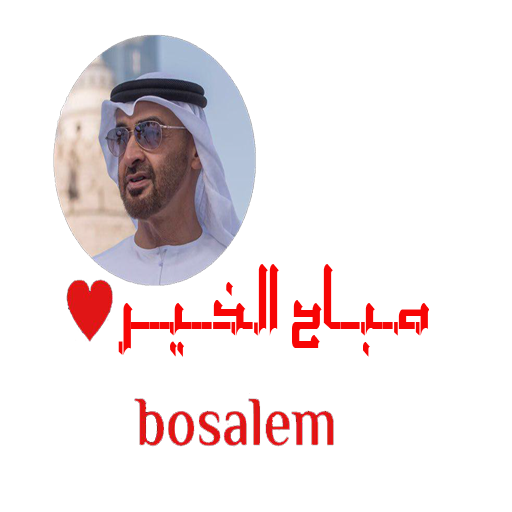
<style>
.page{position:relative;width:512px;height:512px;background:#ffffff}
.page>*{position:absolute;margin:0}
.t1{font:86.6px "";color:#f70505;scale:0.56 1}
</style>
<div class="page">
<p class="t1" style="left:94px;top:238px;width:335px;height:149px">صــبـــاح الـخـــيــــر</p>
</div>
